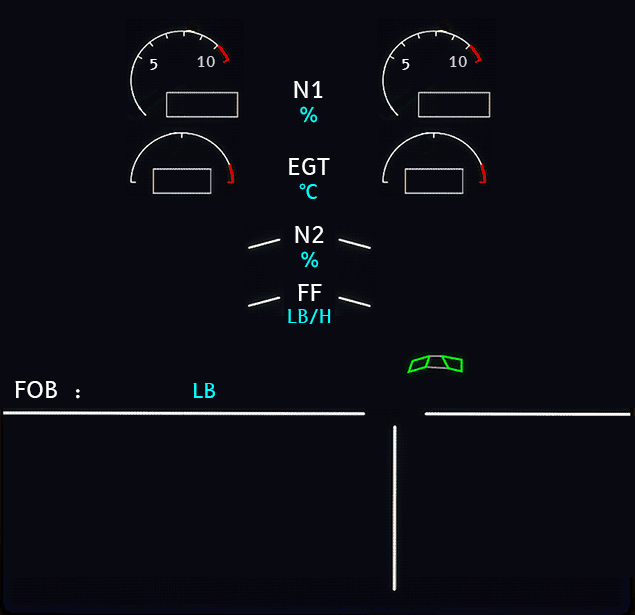
<style>
.page{position:relative;width:635px;height:615px;background:#080911}
.page>*{position:absolute;margin:0}
.t1{font:23px "B612-Regular";letter-spacing:0.01em;color:#ffffff}
.t2{font:20px "B612-Regular";letter-spacing:0.01em;color:#00ffff}
.t3{font:18px "B612-Regular";letter-spacing:0.01em;color:#00ffff}
.t4{font:22px "B612-Regular";letter-spacing:0.01em;color:#ffffff}
</style>
<div class="page">
<p class="t1" style="left:294px;top:81px;width:29px;height:42px;text-align:center">N1<br><span class="t2">%</span></p>
<p class="t1" style="left:289px;top:158px;width:41px;height:41px;text-align:center">EGT<br><span class="t2">°C</span></p>
<p class="t1" style="left:295px;top:226px;width:29px;height:42px;text-align:center">N2<br><span class="t2">%</span></p>
<p class="t3" style="left:288px;top:284px;width:43px;height:40px;text-align:center"><span class="t1">FF<br></span>LB/H</p>
<p class="t4" style="left:15px;top:381px;width:200px;height:18px">FOB  :              <span class="t2">LB</span></p>
</div>
